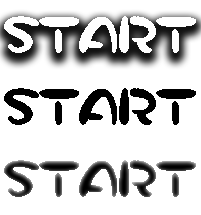
<style>
.page{position:relative;width:201px;height:215px;background:#ffffff}
.page>*{position:absolute;margin:0}
.t1{font:52.5px "Pikmin";letter-spacing:-0.005em;color:#ffffff}
.t2{font:52.5px "Pikmin";letter-spacing:-0.005em;color:#000000}
.t3{font:52.5px "Pikmin";letter-spacing:-0.005em}
</style>
<div class="page">
<p class="t1" style="left:4px;top:16px;width:192px;height:37px">START</p>
<p class="t2" style="left:4px;top:88px;width:192px;height:37px">START</p>
<p class="t3" style="left:4px;top:160px;width:192px;height:37px">START</p>
</div>
